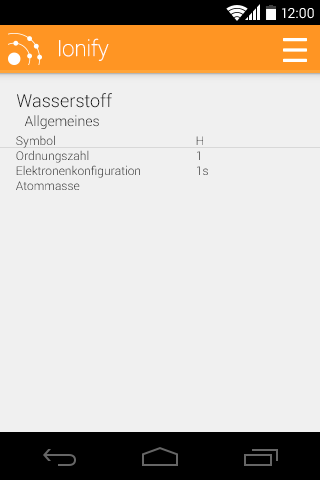
<style>
.page{position:relative;width:320px;height:480px;background:#f0f0f0}
.page>*{position:absolute;margin:0}
.t1{font:14px "Roboto-Regular";color:#ffffff}
.t2{font:22px "Roboto-Thin";color:#ffffff}
.t3{font:18px "Roboto-Light";color:#141414}
.t4{font:14px "Roboto-Light";color:#141414}
.t5{font:12px "Roboto-Light"}
</style>
<div class="page">
<p class="t1" style="left:282px;top:8px;width:32px;height:11px">12:00</p>
<p class="t2" style="left:59px;top:38px;width:50px;height:23px">Ionify</p>
<p class="t3" style="left:17px;top:93px;width:95px;height:15px">Wasserstoff</p>
<p class="t4" style="left:24px;top:115px;width:75px;height:14px">Allgemeines</p>
<p class="t5" style="left:16px;top:135px;width:187px;height:13px">Symbol    H</p>
<p class="t5" style="left:16px;top:150px;width:184px;height:13px">Ordnungszahl   1</p>
<p class="t5" style="left:16px;top:165px;width:192px;height:13px">Elektronenkonfiguration  1s</p>
<p class="t5" style="left:16px;top:181px;width:64px;height:9px">Atommasse</p>
</div>
